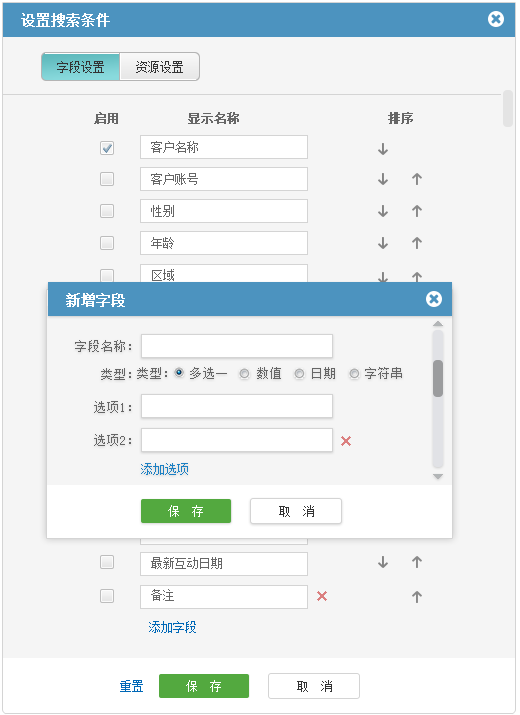
<style>
.page{position:relative;width:520px;height:715px;background:#f5f5f5}
.page>*{position:absolute;margin:0}
.t1{font:14px "SimSun";color:#ffffff;font-weight:bold}
.t2{font:12px "SimSun";color:#333333}
.t3{font:12px "SimSun";color:#666666;font-weight:bold}
.t4{font:12px/32px "SimSun"}
.t5{font:13px/28px "SimSun";color:#666666}
.t6{font:13px/33px "SimSun";color:#666666}
.t7{font:13px "SimSun";color:#666666}
.t8{font:12px "SimSun";color:#1b80c4}
.t9{font:12px "SimSun";color:#ffffff}
.t10{font:12px "SimSun";color:#0068b7}
</style>
<div class="page">
<p class="t1" style="left:21px;top:13px;width:89px;height:14px">设置搜索条件</p>
<p class="t2" style="left:57px;top:61px;width:47px;height:12px">字段设置</p>
<p class="t2" style="left:136px;top:61px;width:47px;height:12px">资源设置</p>
<p class="t3" style="left:94px;top:112px;width:24px;height:12px">启用</p>
<p class="t3" style="left:188px;top:112px;width:51px;height:12px">显示名称</p>
<p class="t3" style="left:388px;top:112px;width:25px;height:12px">排序</p>
<p class="t4" style="left:151px;top:141px;width:71px;height:460px">客户名称<br>客户账号<br>性别<br>年龄<br>区域<br>地址<br>手机<br>座机<br>Email<br>QQ<br>用户来源<br>业 务 员<br>最新互动方式<br>最新互动日期<br>备注</p>
<p class="t1" style="left:66px;top:293px;width:59px;height:14px">新增字段</p>
<p class="t5" style="left:75px;top:340px;width:56px;height:106px;text-align:right">字段名称：<br>类型：<br><span class="t6">选项1：<br>选项2：</span></p>
<p class="t7" style="left:137px;top:367px;width:265px;height:12px">类型：  多选一    数值    日期    字符串</p>
<p class="t8" style="left:141px;top:463px;width:47px;height:12px">添加选项</p>
<p class="t9" style="left:168px;top:505px;width:35px;height:12px">保　存</p>
<p class="t2" style="left:279px;top:505px;width:35px;height:12px">取  消</p>
<p class="t10" style="left:149px;top:621px;width:47px;height:12px">添加字段</p>
<p class="t10" style="left:120px;top:680px;width:23px;height:12px">重置</p>
<p class="t9" style="left:186px;top:680px;width:35px;height:12px">保  存</p>
<p class="t2" style="left:297px;top:680px;width:35px;height:12px">取  消</p>
</div>
